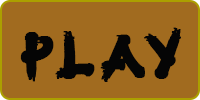
<style>
.page{position:relative;width:200px;height:100px;background:#a16b1f}
.page>*{position:absolute;margin:0}
.t1{font:75px "Fujimaru-Regular";color:#050505;font-weight:bold}
.t2{font:65px "Fujimaru-Regular";color:#050505;font-weight:bold}
</style>
<div class="page">
<p class="t1" style="left:20px;top:27px;width:161px;height:55px">PLAY<span class="t2">Y</span></p>
</div>
